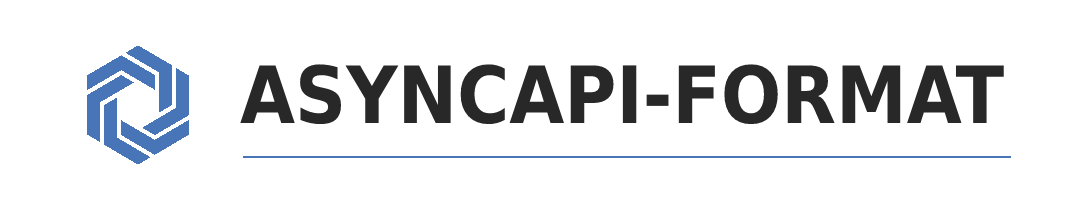
<style>
.page{position:relative;width:1086px;height:200px;background:#ffffff}
.page>*{position:absolute;margin:0}
.t1{font:79px "DejaVuSansCondensed-Bold";color:#282828}
</style>
<div class="page">
<p class="t1" style="left:240px;top:64px;width:764px;height:61px">ASYNCAPI-FORMAT</p>
</div>
